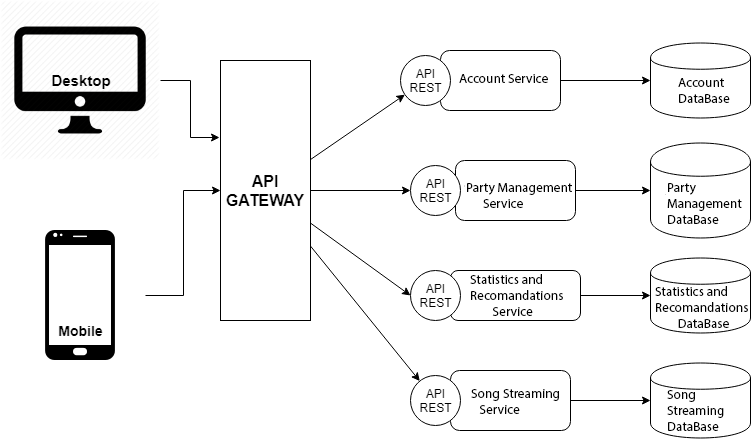
<style>
.page{position:relative;width:751px;height:439px;background:#ffffff}
.page>*{position:absolute;margin:0}
.t1{font:13.3px "MyriadPro-Regular";color:#000000}
</style>
<div class="page">
<p class="t1" style="left:459px;top:74px;width:89px;height:9px">Account Service</p>
<p class="t1" style="left:678px;top:78px;width:52px;height:25px">Account<br>DataBase</p>
<p class="t1" style="left:467px;top:183px;width:105px;height:25px">Party Management<br>      Service</p>
<p class="t1" style="left:667px;top:183px;width:75px;height:41px">Party <br>Management<br>DataBase</p>
<p class="t1" style="left:470px;top:274px;width:93px;height:42px">Statistics and <br>Recomandations<br>        Service</p>
<p class="t1" style="left:655px;top:286px;width:93px;height:42px">Statistics and <br>Recomandations<br>        DataBase</p>
<p class="t1" style="left:471px;top:389px;width:88px;height:25px">Song Streaming<br>   Service</p>
<p class="t1" style="left:667px;top:390px;width:57px;height:41px">Song <br>Streaming<br>DataBase</p>
</div>
